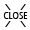
<style>
.page{position:relative;width:30px;height:30px;background:#ffffff}
.page>*{position:absolute;margin:0}
.t1{font:10px "LigurinoCondensed";letter-spacing:0.05em;color:#000000}
</style>
<div class="page">
<p class="t1" style="left:3px;top:12px;width:25px;height:7px">CLOSE</p>
</div>
